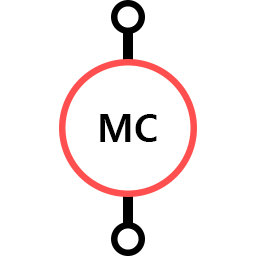
<style>
.page{position:relative;width:256px;height:256px;background:#ffffff}
.page>*{position:absolute;margin:0}
.t1{font:37.5px "MalgunGothicBold";color:#000000}
</style>
<div class="page">
<p class="t1" style="left:100px;top:114px;width:57px;height:28px">MC</p>
</div>
